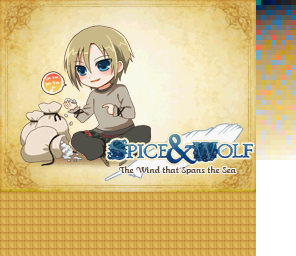
<style>
.page{position:relative;width:296px;height:256px}
.page>*{position:absolute;margin:0}
.t1{font:10px "Wings";color:#685038}
</style>
<div class="page">
<p class="t1" style="left:118px;top:166px;width:118px;height:9px">The Wind that Spans the Sea</p>
</div>
